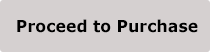
<style>
.page{position:relative;width:210px;height:52px;background:#d5d0d0}
.page>*{position:absolute;margin:0}
.t1{font:16.4px "Verdana-Bold";color:#000000;scale:0.96 1}
</style>
<div class="page">
<p class="t1" style="left:17px;top:19px;width:181px;height:14px">Proceed to Purchase<br>chase</p>
</div>
